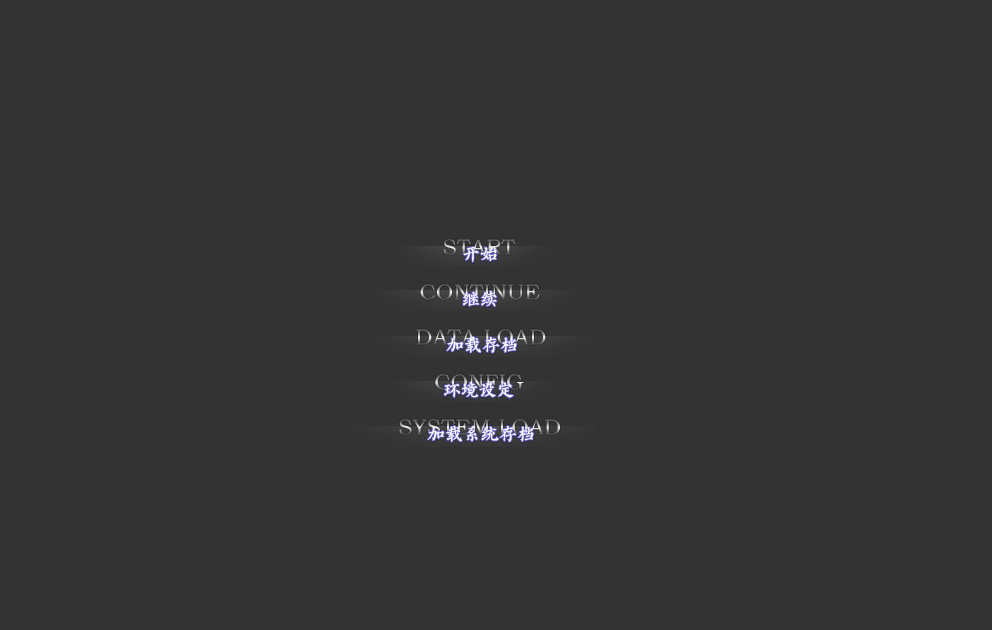
<style>
.page{position:relative;width:992px;height:630px;background:#333333}
.page>*{position:absolute;margin:0}
.t1{font:22px "BookmanOldStyle"}
.t2{font:18px "AaYZQDBTBNon-CommercialUse";color:#ffffff}
</style>
<div class="page">
<p class="t1" style="left:443px;top:239px;width:73px;height:16px">START</p>
<p class="t2" style="left:463px;top:247px;width:34px;height:16px">开始</p>
<p class="t1" style="left:420px;top:284px;width:120px;height:16px">CONTINUE</p>
<p class="t2" style="left:463px;top:291px;width:34px;height:16px">继续</p>
<p class="t1" style="left:416px;top:329px;width:130px;height:16px">DATA LOAD</p>
<p class="t2" style="left:446px;top:336px;width:71px;height:17px">加载存档</p>
<p class="t1" style="left:435px;top:374px;width:89px;height:16px">CONFIG</p>
<p class="t2" style="left:444px;top:382px;width:70px;height:16px">环境设定</p>
<p class="t1" style="left:399px;top:419px;width:161px;height:16px">SYSTEM LOAD</p>
<p class="t2" style="left:427px;top:425px;width:107px;height:17px">加载系统存档</p>
</div>
